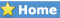
<style>
.page{position:relative;width:60px;height:18px;background:#5292cc}
.page>*{position:absolute;margin:0}
.t1{font:12px "Verdana-Bold";color:#ffffff}
</style>
<div class="page">
<p class="t1" style="left:19px;top:5px;width:38px;height:10px">Home</p>
</div>
